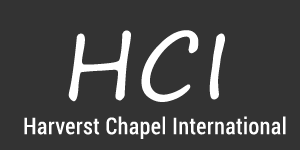
<style>
.page{position:relative;width:300px;height:150px;background:#333333}
.page>*{position:absolute;margin:0}
.t1{font:90px "SegoePrint";letter-spacing:0.02em;color:#ffffff}
.t2{font:23px "RobotoCondensed-Regular";letter-spacing:0.02em;color:#ffffff}
</style>
<div class="page">
<p class="t1" style="left:68px;top:30px;width:157px;height:72px">HCI</p>
<p class="t2" style="left:24px;top:116px;width:262px;height:23px">Harverst Chapel International</p>
</div>
